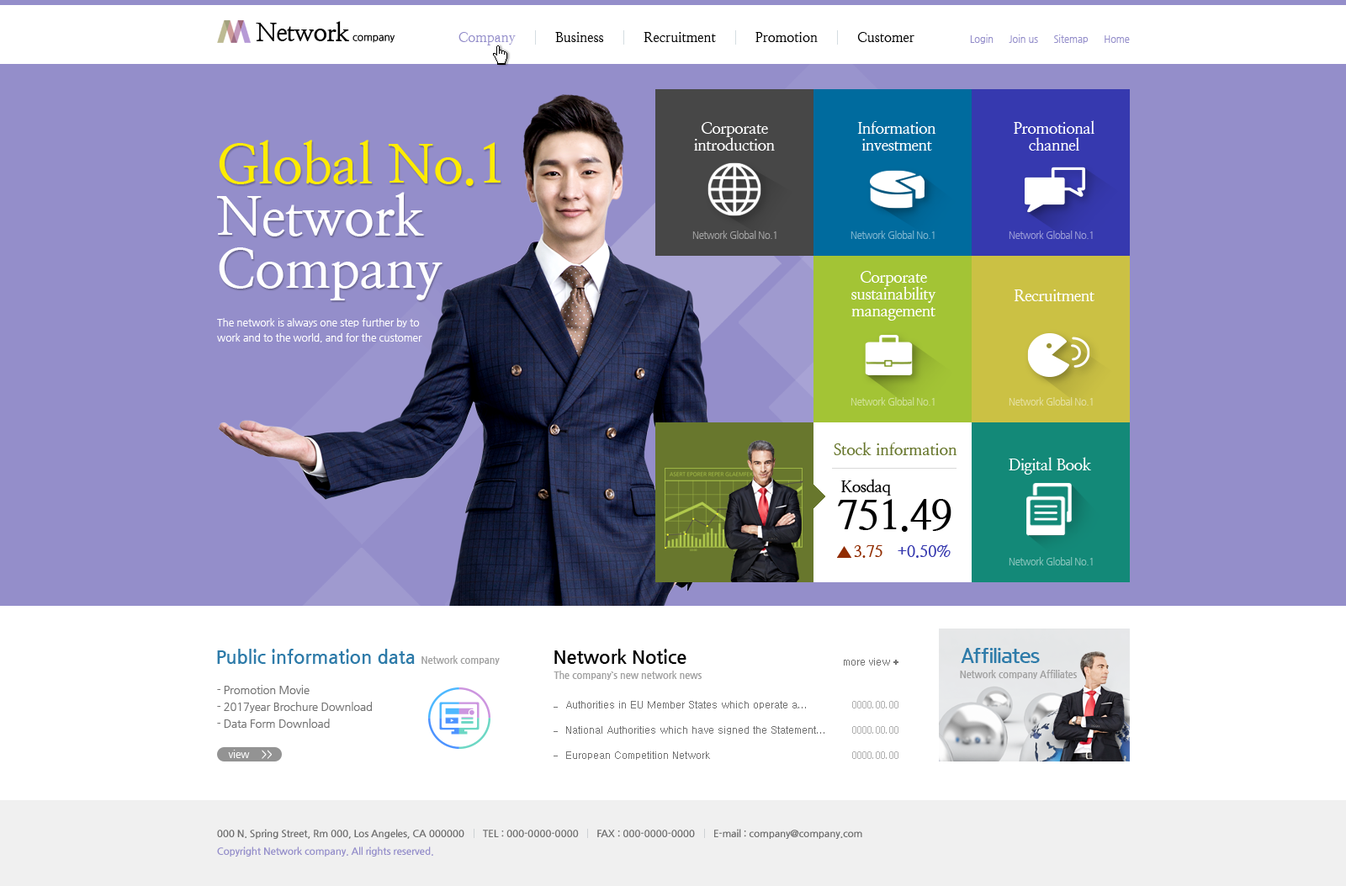
<style>
.page{position:relative;width:1346px;height:886px;background:#948eca}
.page>*{position:absolute;margin:0}
.t1{font:13.5px "NanumMyeongjo";color:#000000}
.t2{font:13.5px "NanumMyeongjo";color:#948eca}
.t3{font:9.3px "NanumGothic";color:#948eca}
.t4{font:16px/16.8px "NanumMyeongjoBold";letter-spacing:-0.03em;color:#ffffff}
.t5{font:53.8px/52.2px "NanumMyeongjoBold";letter-spacing:-0.01em;color:#ffffff}
.t6{font:53.8px/52.2px "NanumMyeongjoBold";letter-spacing:-0.01em;color:#ffec00}
.t7{font:9.3px "NanumGothic";letter-spacing:-0.03em;color:#a3a3a3}
.t8{font:9.3px "NanumGothic";letter-spacing:-0.03em;color:#80b5cf}
.t9{font:9.3px "NanumGothic";letter-spacing:-0.03em;color:#9b9cd7}
.t10{font:16px "NanumMyeongjoBold";letter-spacing:-0.03em;color:#ffffff}
.t11{font:10.1px/15.1px "NanumGothic";letter-spacing:-0.01em;color:#ffffff}
.t12{font:9.3px "NanumGothic";letter-spacing:-0.03em;color:#d1e29a}
.t13{font:9.3px "NanumGothic";letter-spacing:-0.03em;color:#e5e0a2}
.t14{font:16px "NanumMyeongjoBold";letter-spacing:-0.01em;color:#68772d}
.t15{font:16px "NanumMyeongjoBold";letter-spacing:-0.03em;color:#000000}
.t16{font:41.2px "NanumMyeongjoBold";letter-spacing:-0.03em;color:#000000}
.t17{font:16px "NanumMyeongjoBold";letter-spacing:-0.01em;color:#3639af}
.t18{font:16px "NanumMyeongjoBold";letter-spacing:-0.01em;color:#912c00}
.t19{font:9.3px "NanumGothic";letter-spacing:-0.03em;color:#89c4bc}
.t20{font:18.5px "NanumGothicBold";color:#2e7ba9}
.t21{font:18.5px "NanumGothicBold";color:#000000}
.t22{font:9.3px "NanumGothicBold";color:#a2a2a2}
.t23{font:10.9px/16.8px "NanumGothic";letter-spacing:-0.01em;color:#737373}
.t24{font:10.1px/25.2px "Dotum";color:#737373}
.t25{font:10.1px/25.2px "Dotum";color:#afafaf}
.t26{font:10.1px "NanumGothic";letter-spacing:-0.01em;color:#ffffff}
.t27{font:10.1px "NanumGothicBold";letter-spacing:-0.02em;color:#6e6e6e}
.t28{font:10.1px "NanumGothicBold";letter-spacing:-0.02em;color:#948eca}
</style>
<div class="page">
<p class="t1" style="left:458px;top:32px;width:456px;height:13px"><span class="t2">Company          </span>Business          Recruitment          Promotion          Customer</p>
<p class="t3" style="left:970px;top:34px;width:160px;height:10px">Login      Join us      Sitemap      Home</p>
<p class="t4" style="left:694px;top:122px;width:81px;height:29px;text-align:center">Corporate<br>introduction</p>
<p class="t4" style="left:857px;top:121px;width:79px;height:30px;text-align:center">Information<br>investment</p>
<p class="t4" style="left:1014px;top:120px;width:81px;height:31px;text-align:center">Promotional<br>channel</p>
<p class="t5" style="left:217px;top:140px;width:284px;height:160px"><span class="t6">Global No.1<br></span>Network<br>Company</p>
<p class="t7" style="left:692px;top:231px;width:85px;height:8px">Network Global No.1</p>
<p class="t8" style="left:851px;top:231px;width:84px;height:8px">Network Global No.1</p>
<p class="t9" style="left:1009px;top:231px;width:84px;height:8px">Network Global No.1</p>
<p class="t4" style="left:851px;top:271px;width:85px;height:50px;text-align:center">Corporate<br>sustainability<br>management</p>
<p class="t10" style="left:1014px;top:289px;width:81px;height:12px">Recruitment</p>
<p class="t11" style="left:217px;top:318px;width:205px;height:24px">The network is always one step further by to<br>work and to the world, and for the customer</p>
<p class="t12" style="left:851px;top:397px;width:84px;height:8px">Network Global No.1</p>
<p class="t13" style="left:1009px;top:397px;width:84px;height:8px">Network Global No.1</p>
<p class="t14" style="left:834px;top:442px;width:123px;height:13px">Stock information</p>
<p class="t10" style="left:1009px;top:457px;width:82px;height:17px">Digital Book</p>
<p class="t15" style="left:841px;top:479px;width:50px;height:17px">Kosdaq</p>
<p class="t16" style="left:838px;top:499px;width:113px;height:33px">751.49</p>
<p class="t17" style="left:854px;top:544px;width:97px;height:14px"><span class="t18">3.75   </span>+0.50%</p>
<p class="t19" style="left:1009px;top:557px;width:84px;height:8px">Network Global No.1</p>
<p class="t20" style="left:217px;top:649px;width:198px;height:15px">Public information data</p>
<p class="t21" style="left:554px;top:649px;width:132px;height:15px">Network Notice</p>
<p class="t22" style="left:421px;top:655px;width:79px;height:10px">Network company</p>
<p class="t22" style="left:554px;top:671px;width:148px;height:9px">The company`s new network news</p>
<p class="t23" style="left:217px;top:685px;width:155px;height:43px">- Promotion Movie<br>- 2017year Brochure Download<br>- Data Form Download</p>
<p class="t24" style="left:566px;top:701px;width:258px;height:59px">Authorities in EU Member States which operate a...<br>National Authorities which have signed the Statement...<br>European Competition Network</p>
<p class="t25" style="left:852px;top:701px;width:46px;height:58px">0000.00.00<br>0000.00.00<br>0000.00.00</p>
<p class="t26" style="left:228px;top:750px;width:22px;height:8px">view</p>
<p class="t27" style="left:217px;top:829px;width:645px;height:10px">000 N. Spring Street, Rm 000, Los Angeles, CA 000000       TEL : 000-0000-0000       FAX : 000-0000-0000       E-mail : company@company.com</p>
<p class="t28" style="left:217px;top:846px;width:216px;height:10px">Copyright Network company. All rights reserved.</p>
</div>
